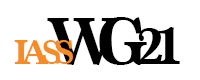
<style>
.page{position:relative;width:200px;height:80px;background:#ffffff}
.page>*{position:absolute;margin:0}
.t1{font:70px "Marion-Bold";letter-spacing:-0.3em;color:#000000}
.t2{font:54px "Marion-Bold";letter-spacing:-0.13em;color:#000000}
.t3{font:36px "Marion-Bold";letter-spacing:-0.2em;color:#f78b26}
</style>
<div class="page">
<p class="t1" style="left:47px;top:17px;width:133px;height:48px">WG              <span class="t2">21</span></p>
<p class="t3" style="left:14px;top:40px;width:59px;height:24px">IASS</p>
</div>
